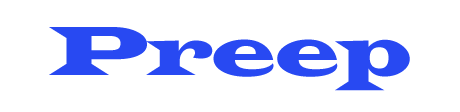
<style>
.page{position:relative;width:460px;height:112px;background:#ffffff}
.page>*{position:absolute;margin:0}
.t1{font:72px "LatinWide";color:#2849f2}
.t2{font:72px "LatinWide";color:#080808}
</style>
<div class="page">
<p class="t1" style="left:49px;top:27px;width:361px;height:64px"><span class="t2">            </span>Preep</p>
</div>
